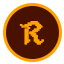
<style>
.page{position:relative;width:64px;height:64px;background:#491100}
.page>*{position:absolute;margin:0}
.t1{font:32.2px "StitchWarrior";letter-spacing:0.12em;color:#ffa200;font-weight:bold}
</style>
<div class="page">
<p class="t1" style="left:19px;top:21px;width:25px;height:24px">R</p>
</div>
